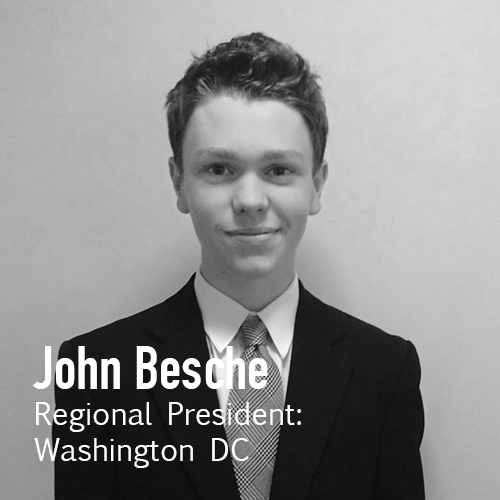
<style>
.page{position:relative;width:500px;height:500px}
.page>*{position:absolute;margin:0}
.t1{font:30px "EuphemiaUCAS";color:#ffffff}
.t2{font:60px "DINCondensed-Bold";color:#ffffff}
</style>
<div class="page">
<p class="t1" style="left:32px;top:346px;width:269px;height:122px"><span class="t2">John Besche<br></span>Regional President:<br>Washington DC</p>
</div>
